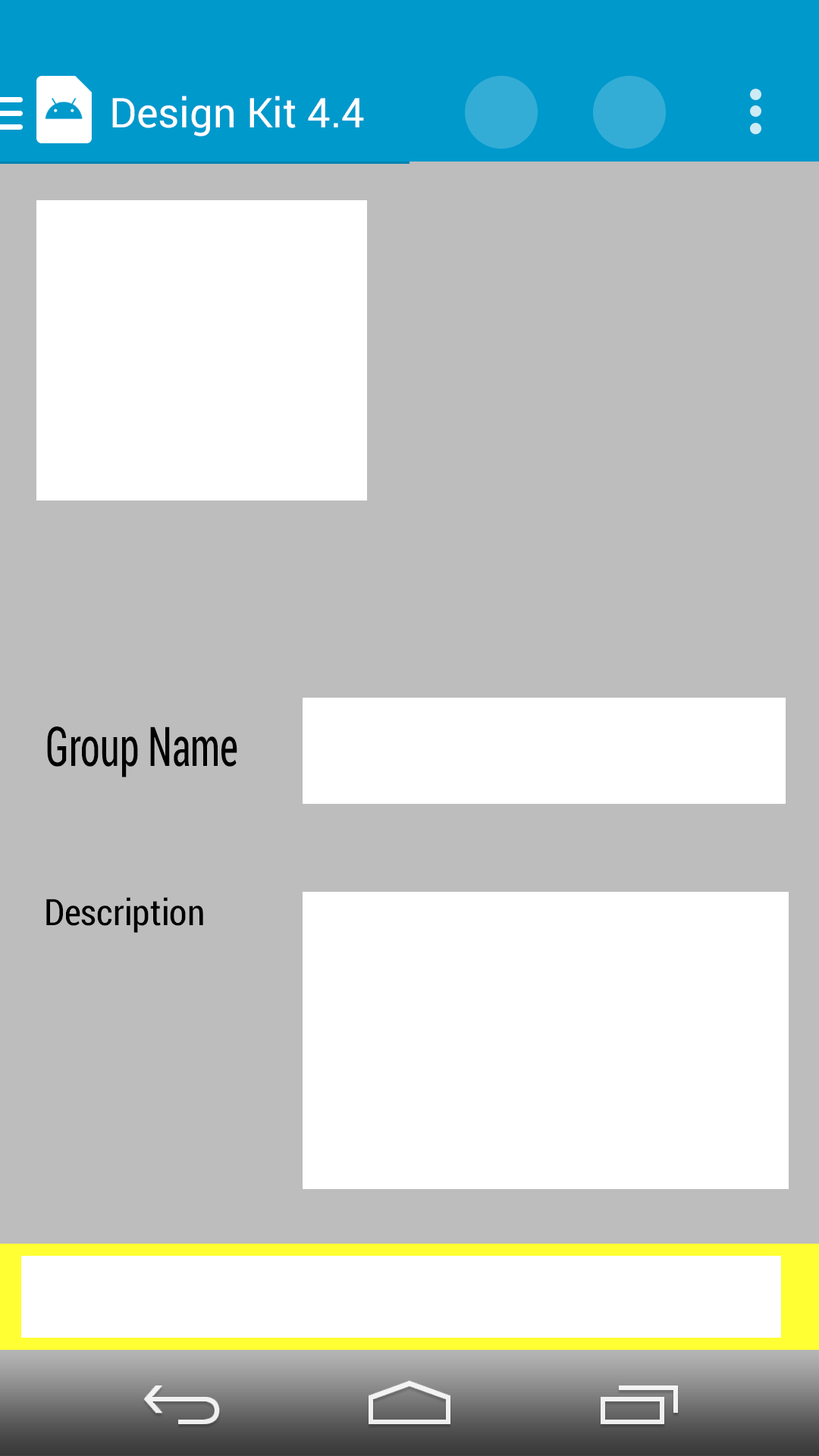
<style>
.page{position:relative;width:819px;height:1456px;background:#bdbdbd}
.page>*{position:absolute;margin:0}
.t1{font:40.9px "Roboto-Regular";color:#ffffff}
.t2{font:54.5px "RobotoCondensed-Regular";color:#000000;scale:0.73 1}
.t3{font:36.4px "RobotoCondensed-Regular";color:#000000}
</style>
<div class="page">
<p class="t1" style="left:112px;top:96px;width:252px;height:40px">Design Kit 4.4</p>
<p class="t2" style="left:47px;top:726px;width:190px;height:51px">Group Name</p>
<p class="t3" style="left:46px;top:897px;width:157px;height:36px">Description</p>
</div>
